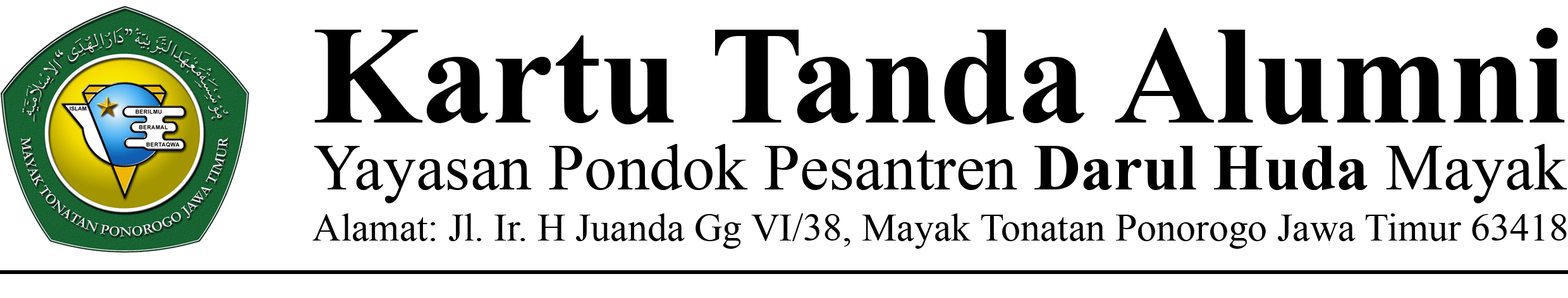
<style>
.page{position:relative;width:1568px;height:298px;background:#ffffff}
.page>*{position:absolute;margin:0}
.t1{font:140.2px "TimesNewRomanPS-BoldMT";color:#000000}
.t2{font:15.7px "TimesNewRomanPSMT";color:#000000}
.t3{font:15.7px "TimesNewRomanPS-BoldMT";color:#000000}
.t4{font:9.3px "TimesNewRomanPSMT";color:#000000}
</style>
<div class="page">
<p class="t1" style="left:314px;top:28px;width:1251px;height:97px">Kartu Tanda Alumni</p>
<p class="t2" style="left:314px;top:144px;width:1253px;height:60px">Yayasan Pondok Pesantren <span class="t3">Darul Huda</span> Mayak</p>
<p class="t4" style="left:312px;top:214px;width:1255px;height:35px">Alamat: Jl. Ir. H Juanda Gg VI/38, Mayak Tonatan Ponorogo Jawa Timur 63418</p>
</div>
